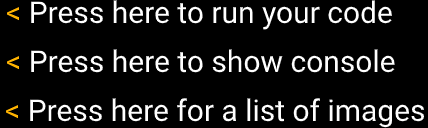
<style>
.page{position:relative;width:428px;height:128px;background:#000000}
.page>*{position:absolute;margin:0}
.t1{font:30px "Roboto-Regular";color:#ffffff}
.t2{font:30px "Roboto-Regular";color:#ffb301}
</style>
<div class="page">
<p class="t1" style="left:7px;top:0px;width:385px;height:30px"><span class="t2">&lt; </span>Press here to run your code</p>
<p class="t1" style="left:7px;top:49px;width:388px;height:24px"><span class="t2">&lt; </span>Press here to show console</p>
<p class="t1" style="left:6px;top:98px;width:419px;height:30px"><span class="t2">&lt; </span>Press here for a list of images</p>
</div>
